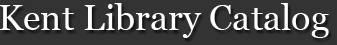
<style>
.page{position:relative;width:337px;height:45px;background:#333333}
.page>*{position:absolute;margin:0}
.t1{font:36px "Georgia";color:#ffffff}
</style>
<div class="page">
<p class="t1" style="left:0px;top:3px;width:329px;height:35px">Kent Library Catalog</p>
</div>
